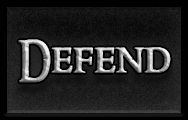
<style>
.page{position:relative;width:188px;height:120px}
.page>*{position:absolute;margin:0}
.t1{font:40px "RingbearerMedium";letter-spacing:0.01em;font-weight:bold}
</style>
<div class="page">
<p class="t1" style="left:18px;top:39px;width:153px;height:44px">Defend</p>
</div>
